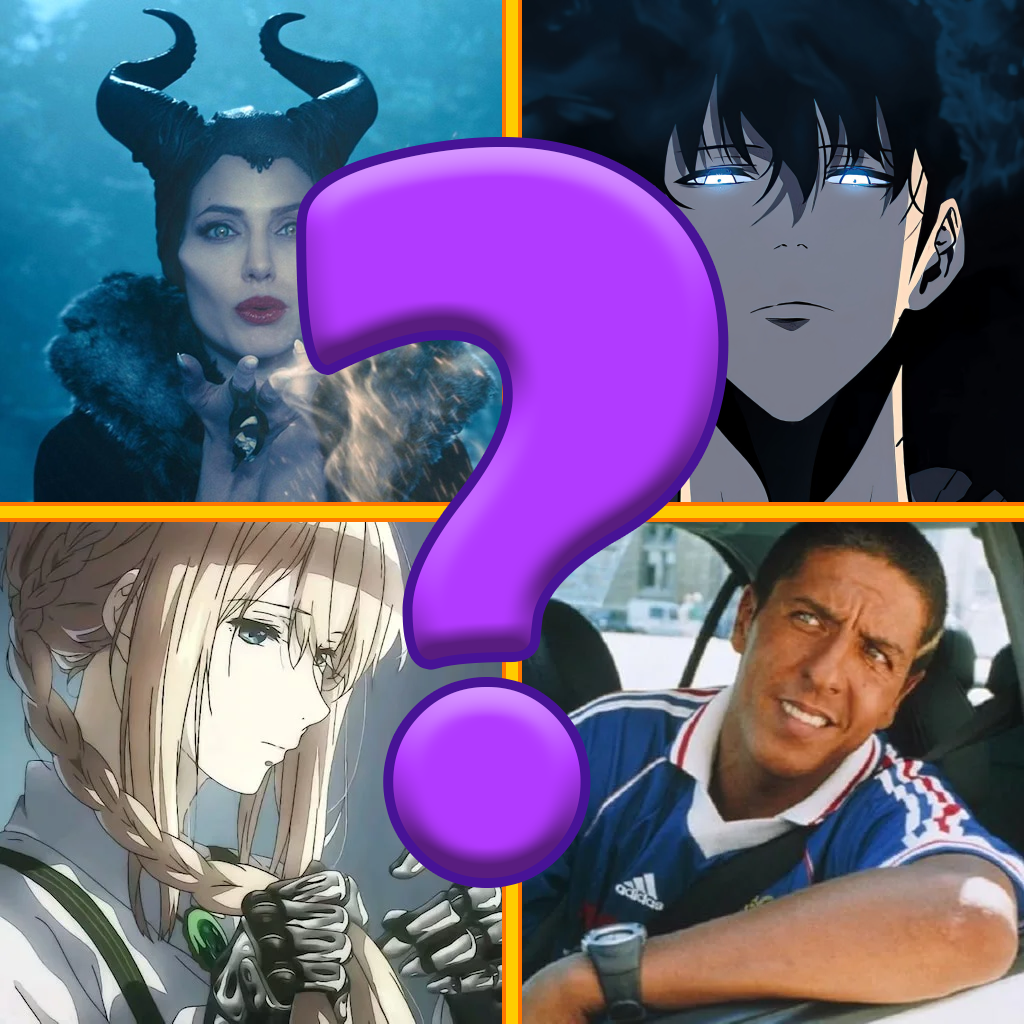
<style>
.page{position:relative;width:1024px;height:1024px}
.page>*{position:absolute;margin:0}
.t1{font:1041.7px "BerlinSansFBDemi-Bold";color:#b13bff}
</style>
<div class="page">
<p class="t1" style="left:306px;top:147px;width:413px;height:731px">?</p>
</div>
